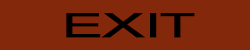
<style>
.page{position:relative;width:250px;height:50px;background:#83280b}
.page>*{position:absolute;margin:0}
.t1{font:33.3px "AkzidenzGroteskBE-Ex";color:#000000;font-weight:bold;scale:1.45 1}
</style>
<div class="page">
<p class="t1" style="left:66px;top:13px;width:129px;height:25px">EXIT</p>
</div>
